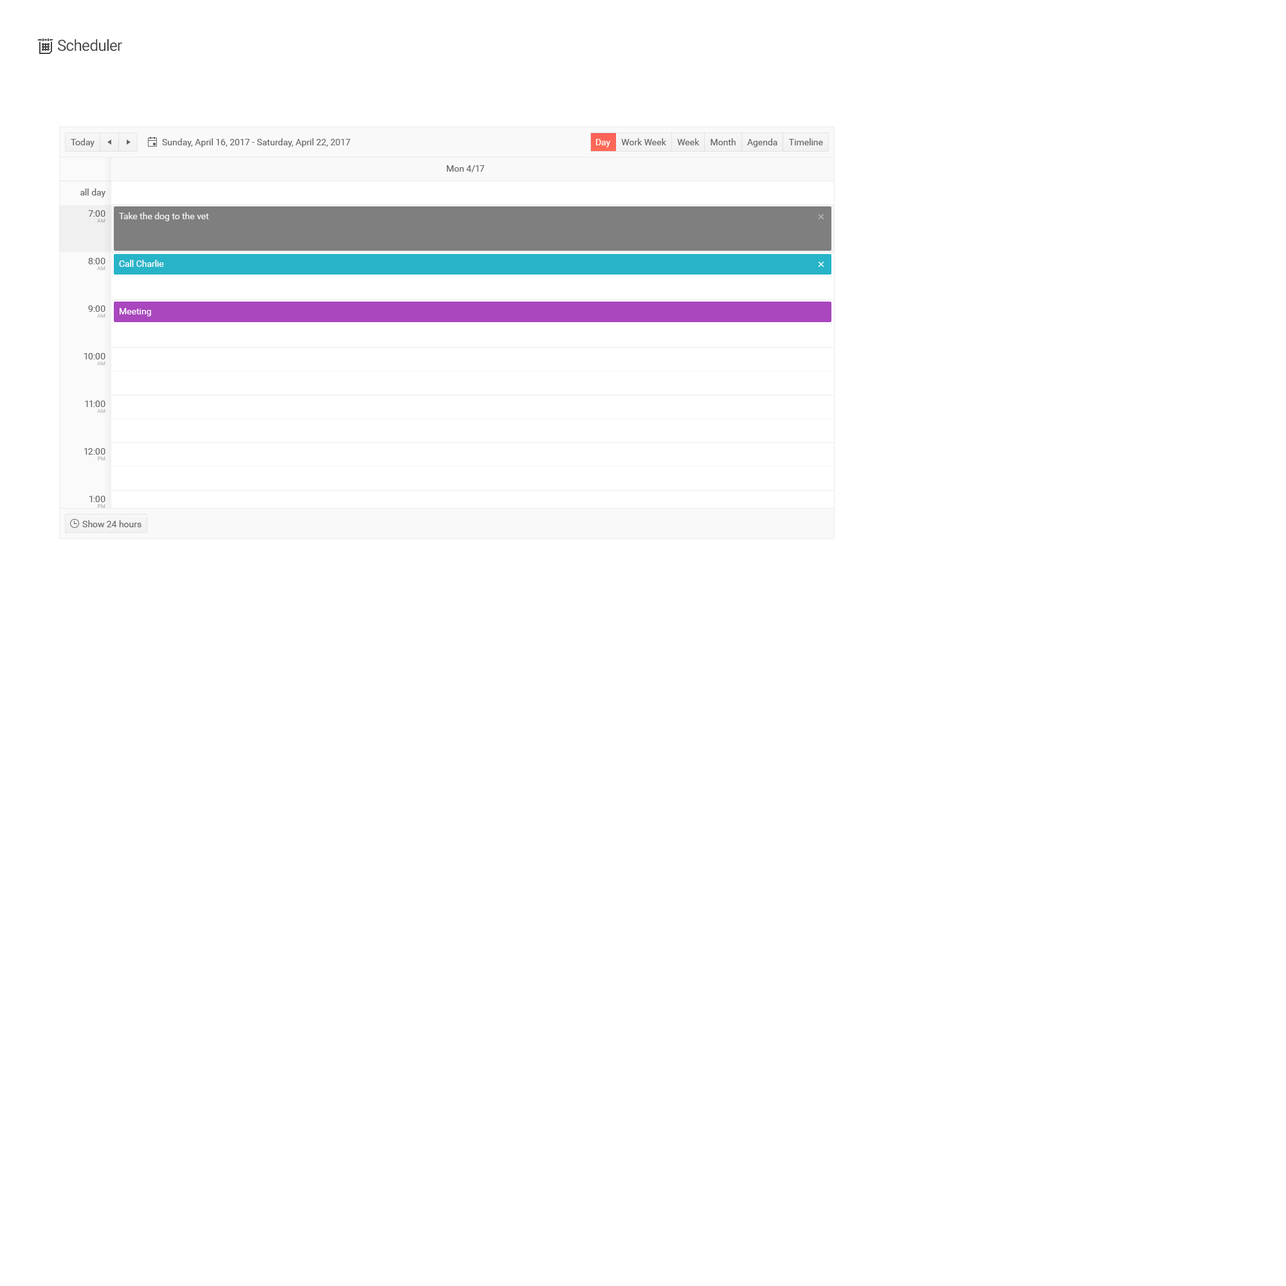
<style>
.page{position:relative;width:1286px;height:1286px;background:#ffffff}
.page>*{position:absolute;margin:0}
.t1{font:15.4px "Roboto-Regular";letter-spacing:-0.025em;color:#454545}
.t2{font:9px "Roboto-Regular";color:#656565}
.t3{font:9px "Roboto-Regular";color:#ffffff}
.t4{font:9px/38.6px "Roboto-Regular";color:#656565}
.t5{font:9px/21.9px "Roboto-Regular";color:#656565}
.t6{font:9px/9px "Roboto-Regular";color:#bababa}
</style>
<div class="page">
<p class="t1" style="left:58px;top:39px;width:64px;height:12px">Scheduler</p>
<p class="t2" style="left:71px;top:138px;width:23px;height:9px">Today</p>
<p class="t2" style="left:162px;top:138px;width:188px;height:9px">Sunday, April 16, 2017 - Saturday, April 22, 2017</p>
<p class="t2" style="left:596px;top:138px;width:227px;height:9px"><span class="t3">Day     </span>Work Week     Week     Month     Agenda     Timeline</p>
<p class="t2" style="left:447px;top:165px;width:38px;height:7px">Mon 4/17</p>
<p class="t2" style="left:80px;top:188px;width:26px;height:9px">all day</p>
<p class="t4" style="left:84px;top:210px;width:21px;height:299px;text-align:right"><span class="t5">7:00<br></span><span class="t6">AM<br></span>8:00<br><span class="t6">AM<br></span>9:00<br><span class="t6">AM<br></span>10:00<br><span class="t6">AM<br></span>11:00<br><span class="t6">AM<br></span>12:00<br><span class="t6">PM<br></span>1:00<br><span class="t6">PM</span></p>
<p class="t3" style="left:119px;top:212px;width:90px;height:9px">Take the dog to the vet</p>
<p class="t3" style="left:119px;top:260px;width:45px;height:7px">Call Charlie</p>
<p class="t3" style="left:120px;top:308px;width:31px;height:8px">Meeting</p>
<p class="t2" style="left:82px;top:520px;width:59px;height:7px">Show 24 hours</p>
</div>
